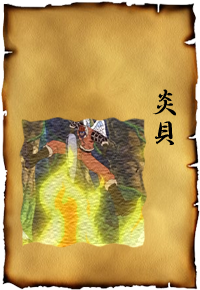
<style>
.page{position:relative;width:200px;height:290px}
.page>*{position:absolute;margin:0}
.t1{font:30px "HGPGyoshotai";color:#000000}
</style>
<div class="page">
<p class="t1" style="left:153px;top:89px;width:23px;height:56px;text-align:center">炎貝</p>
</div>
